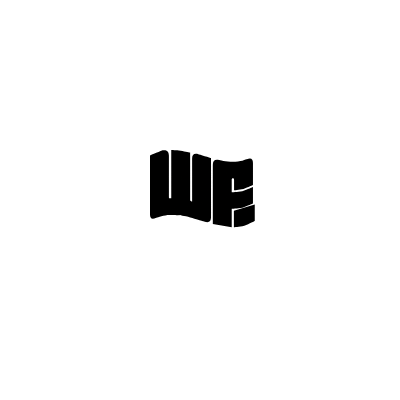
<style>
.page{position:relative;width:400px;height:400px;background:#ffffff}
.page>*{position:absolute;margin:0}
.t1{font:90px "Pincoyablack-Black";color:#000000}
</style>
<div class="page">
<p class="t1" style="left:150px;top:149px;width:105px;height:79px">wf</p>
</div>
